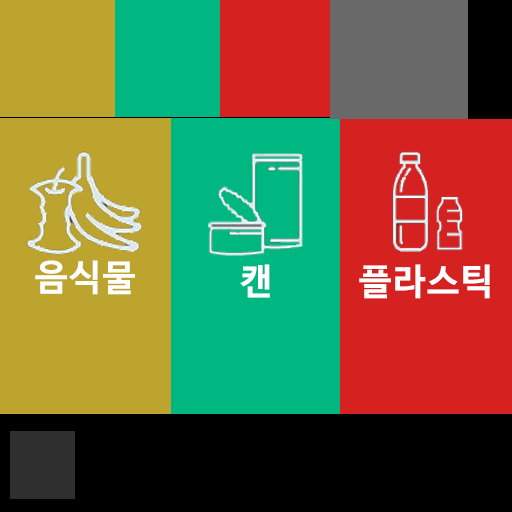
<style>
.page{position:relative;width:512px;height:512px;background:#d62121}
.page>*{position:absolute;margin:0}
.t1{font:36px "NanumBarunGothicBold";letter-spacing:0.05em;color:#ffffff}
</style>
<div class="page">
<p class="t1" style="left:35px;top:260px;width:100px;height:35px">음식물</p>
<p class="t1" style="left:240px;top:264px;width:30px;height:34px">캔</p>
<p class="t1" style="left:359px;top:264px;width:131px;height:35px">플라스틱</p>
</div>
